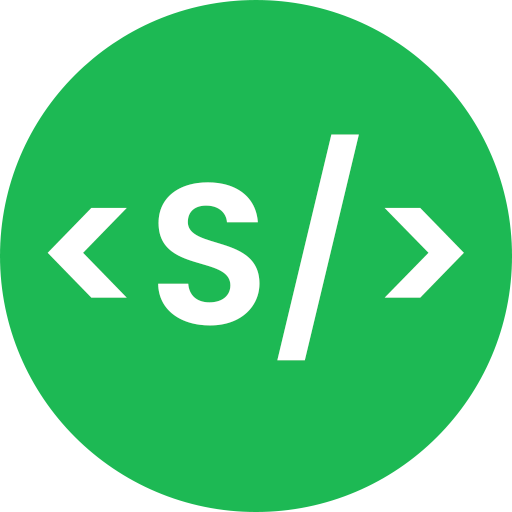
<style>
.page{position:relative;width:512px;height:512px;background:#1db954}
.page>*{position:absolute;margin:0}
.t1{font:200px "Poppins-SemiBold";color:#ffffff}
</style>
<div class="page">
<p class="t1" style="left:47px;top:134px;width:417px;height:227px">&lt;S/&gt;</p>
</div>
